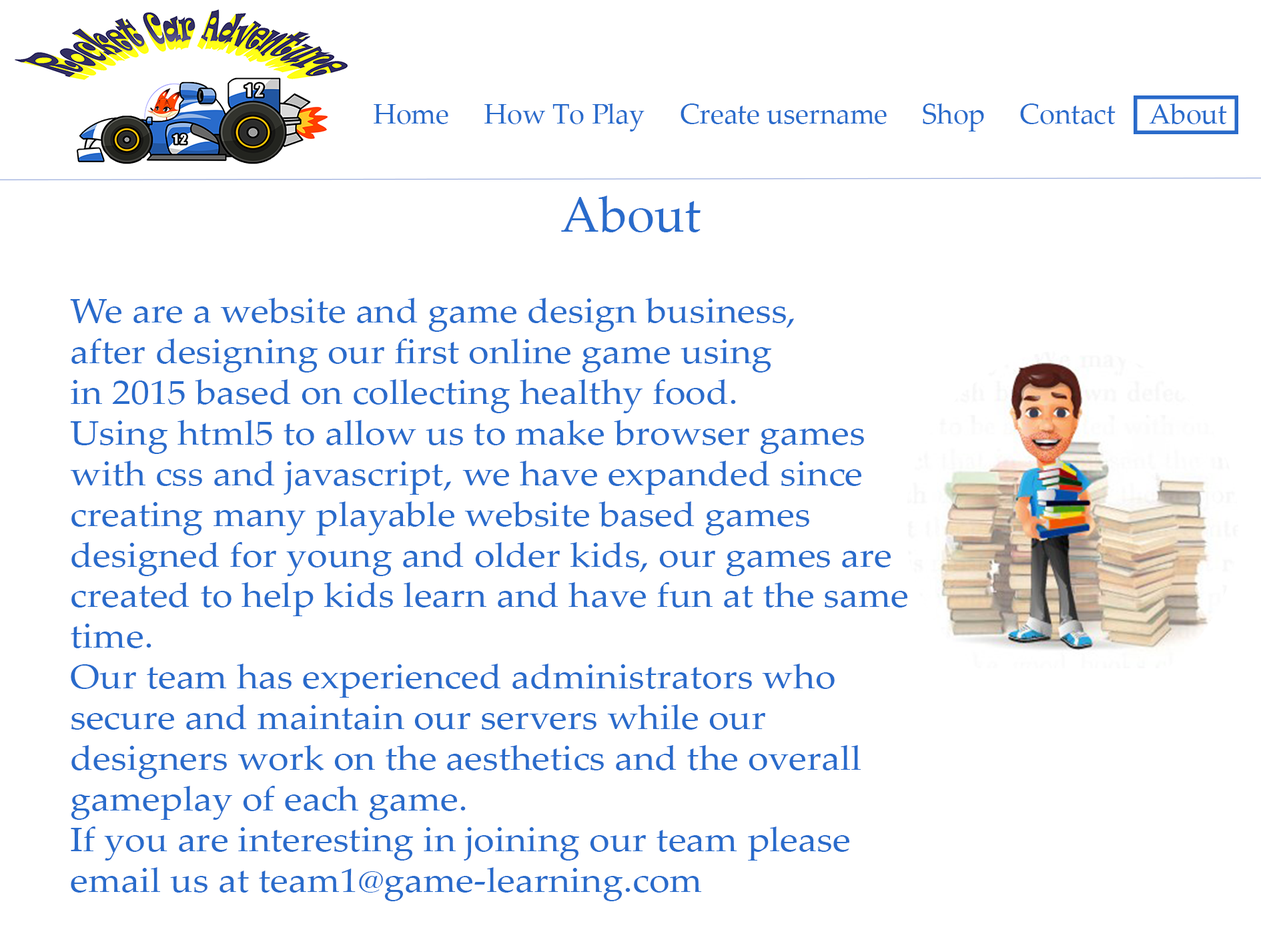
<style>
.page{position:relative;width:1261px;height:946px;background:#ffffff}
.page>*{position:absolute;margin:0}
.t1{font:27.8px "PalatinoLinotype-Roman";color:#296bcb}
.t2{font:50px "PalatinoLinotype-Roman";color:#296bcb}
.t3{font:33.9px "PalatinoLinotype-Roman";color:#296bcb;scale:1.1 1}
</style>
<div class="page">
<p class="t1" style="left:374px;top:103px;width:853px;height:28px">Home     How To Play     Create username     Shop     Contact     About</p>
<p class="t2" style="left:561px;top:196px;width:140px;height:36px">About</p>
<p class="t3" style="left:70px;top:298px;width:837px;height:603px">We are a website and game design business,<br>after designing our first online game using <br>in 2015 based on collecting healthy food.<br>Using html5 to allow us to make browser games<br>with css and javascript, we have expanded since<br>creating many playable website based games <br>designed for young and older kids, our games are<br>created to help kids learn and have fun at the same<br>time. <br>Our team has experienced administrators who <br>secure and maintain our servers while our <br>designers work on the aesthetics and the overall <br>gameplay of each game.<br>If you are interesting in joining our team please<br>email us at team1@game-learning.com</p>
</div>
